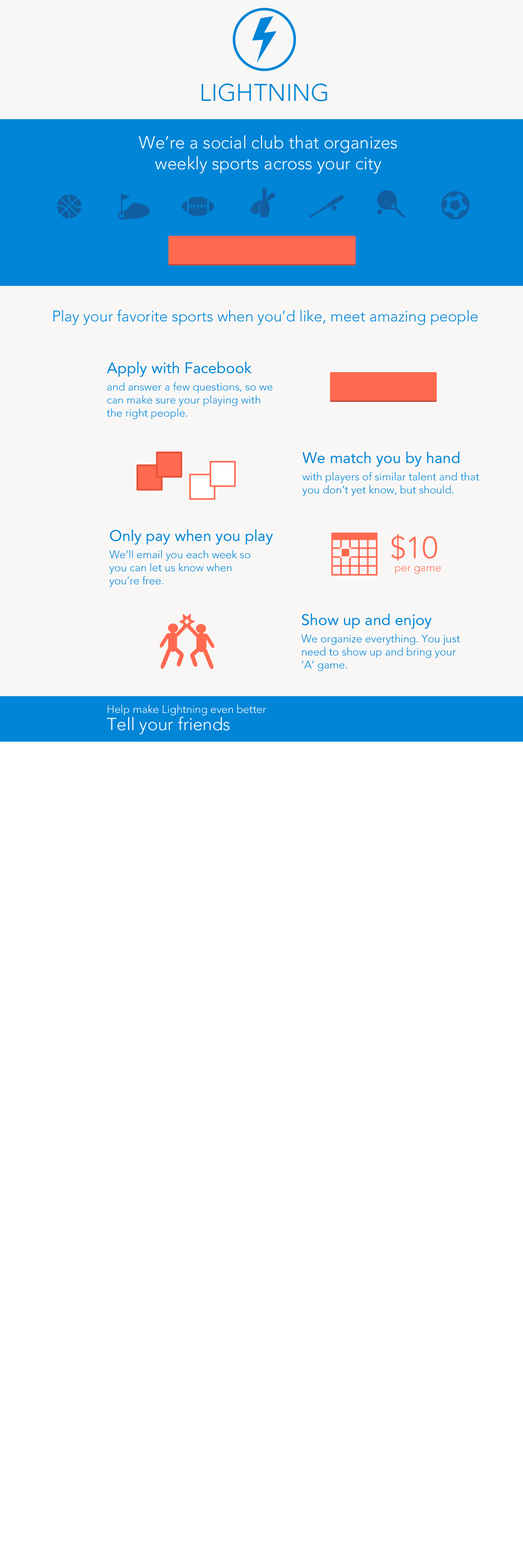
<style>
.page{position:relative;width:523px;height:1568px;background:#ffffff}
.page>*{position:absolute;margin:0}
.t1{font:24px "AvenirLTPro-Light";color:#0085d7;text-transform:uppercase}
.t2{font:17.4px "AvenirLTPro-Light";color:#ffffff}
.t3{font:15.2px "AvenirLTPro-Light";color:#0085d7}
.t4{font:10.9px/13.1px "AvenirLTPro-Light";color:#0085d7}
.t5{font:15.2px "AvenirLTPro-Roman";color:#0085d7}
.t6{font:10.9px/17.4px "AvenirLTPro-Light";color:#0085d7}
.t7{font:15.2px/65.3px "AvenirLTPro-Roman";color:#0085d7}
.t8{font:10.9px "AvenirLTPro-Light";color:#0085d7}
.t9{font:10.9px/13.1px "AvenirLTPro-Light";color:#ff6950}
.t10{font:30.5px/13.1px "AvenirLTPro-Light";color:#ff6950}
.t11{font:10.9px/13.1px "AvenirLTPro-Light";color:#ffffff}
.t12{font:17.4px/17.4px "AvenirLTPro-Light";color:#ffffff}
</style>
<div class="page">
<p class="t1" style="left:201px;top:83px;width:126px;height:18px">Lightning</p>
<p class="t2" style="left:139px;top:135px;width:258px;height:39px;text-align:center">We’re a social club that organizes<br>weekly sports across your city</p>
<p class="t3" style="left:53px;top:309px;width:425px;height:16px">Play your favorite sports when you’d like, meet amazing people</p>
<p class="t4" style="left:107px;top:362px;width:165px;height:57px"><span class="t5">Apply with Facebook <br></span><span class="t6">and answer a few questions, so we<br></span>can make sure your playing with<br>the right people.</p>
<p class="t6" style="left:302px;top:452px;width:177px;height:44px"><span class="t7">We match you by hand<br></span>with players of similar talent and that <br><span class="t8">you don’t yet know, but should.</span></p>
<p class="t4" style="left:109px;top:529px;width:164px;height:58px"><span class="t5">Only pay when you play<br></span><span class="t6">We’ll email you each week so<br></span>you can let us know when <br>you’re free.</p>
<p class="t9" style="left:391px;top:534px;width:50px;height:40px;text-align:center"><span class="t10">$10 <br></span>per game</p>
<p class="t4" style="left:301px;top:614px;width:159px;height:57px"><span class="t7">Show up and enjoy<br></span><span class="t6">We organize everything. You just<br></span>need to show up and bring your <br>‘A’ game.</p>
<p class="t11" style="left:107px;top:705px;width:159px;height:29px">Help make Lightning even better<br><span class="t12">Tell your friends</span></p>
</div>
